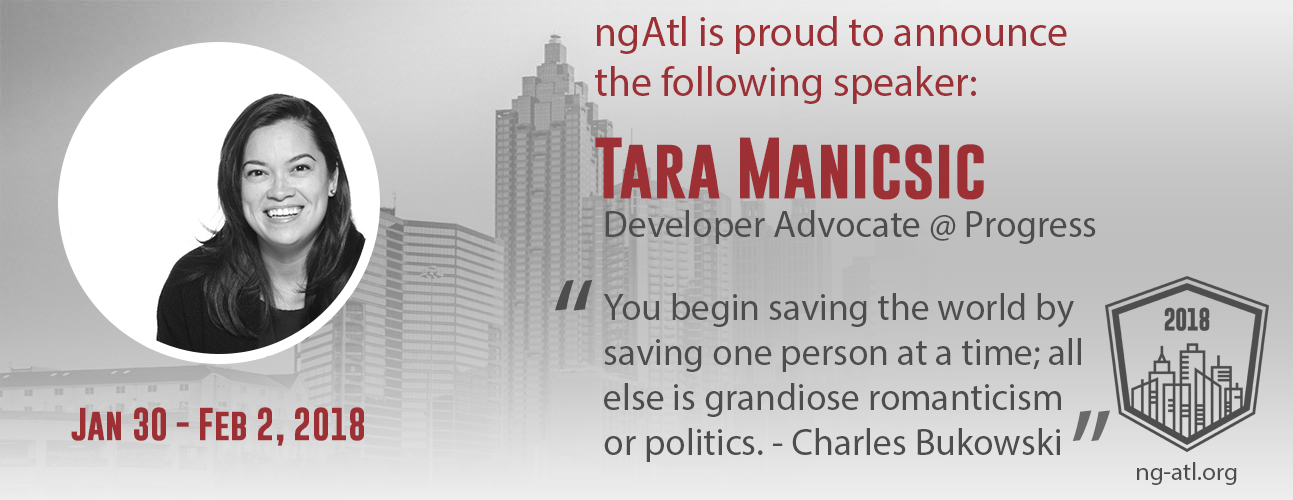
<style>
.page{position:relative;width:1293px;height:500px}
.page>*{position:absolute;margin:0}
.t1{font:41.7px "MyriadPro-Regular";color:#9d3035}
.t2{font:62.5px "GoboldBold";color:#9d3035}
.t3{font:37.5px "MyriadPro-Regular";color:#4d4d4e}
.t4{font:125px "MyriadPro-Regular";color:#4d4d4e}
.t5{font:33.3px "GoboldBold";color:#9d3035}
.t6{font:125px "MyriadPro-Regular";color:#6a6a6b}
.t7{font:25px "MyriadPro-Regular";color:#4d4d4e}
</style>
<div class="page">
<p class="t1" style="left:595px;top:16px;width:472px;height:88px">ngAtl is proud to announce the following speaker:</p>
<p class="t2" style="left:595px;top:137px;width:389px;height:63px">Tara Manicsic</p>
<p class="t3" style="left:605px;top:210px;width:491px;height:34px">Developer Advocate @ Progress</p>
<p class="t4" style="left:555px;top:279px;width:38px;height:32px">“</p>
<p class="t3" style="left:603px;top:293px;width:478px;height:169px">You begin saving the world by saving one person at a time; all else is grandiose romanticism or politics. - Charles Bukowski</p>
<p class="t5" style="left:71px;top:407px;width:293px;height:39px">Jan 30 - Feb 2, 2018</p>
<p class="t6" style="left:1072px;top:410px;width:38px;height:32px;rotate:180deg">“</p>
<p class="t7" style="left:1137px;top:462px;width:100px;height:23px">ng-atl.org</p>
</div>
